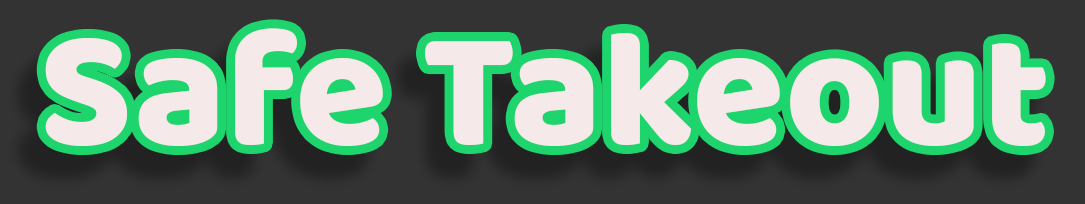
<style>
.page{position:relative;width:1085px;height:204px;background:#333333}
.page>*{position:absolute;margin:0}
.t1{font:169px "BalooDa-Regular";color:#f5e9e9}
</style>
<div class="page">
<p class="t1" style="left:45px;top:28px;width:1001px;height:118px">Safe Takeout</p>
</div>
